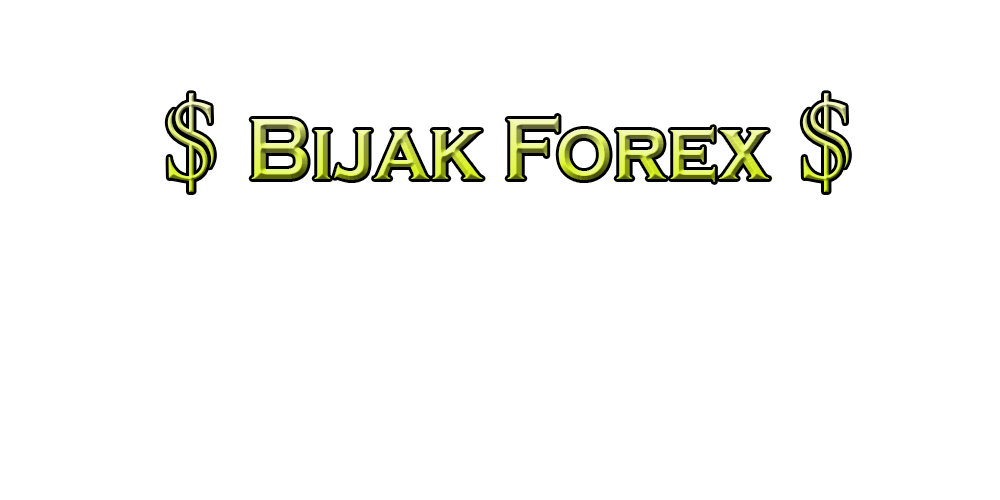
<style>
.page{position:relative;width:1000px;height:500px;background:#ffffff}
.page>*{position:absolute;margin:0}
.t1{font:90.1px "CopperplateGothic-Bold";scale:0.88 1}
.t2{font:143.6px "ColonnaMT";scale:0.88 1}
</style>
<div class="page">
<p class="t1" style="left:167px;top:93px;width:682px;height:99px"><span class="t2">$ </span>Bijak Forex<span class="t2"> $</span></p>
</div>
